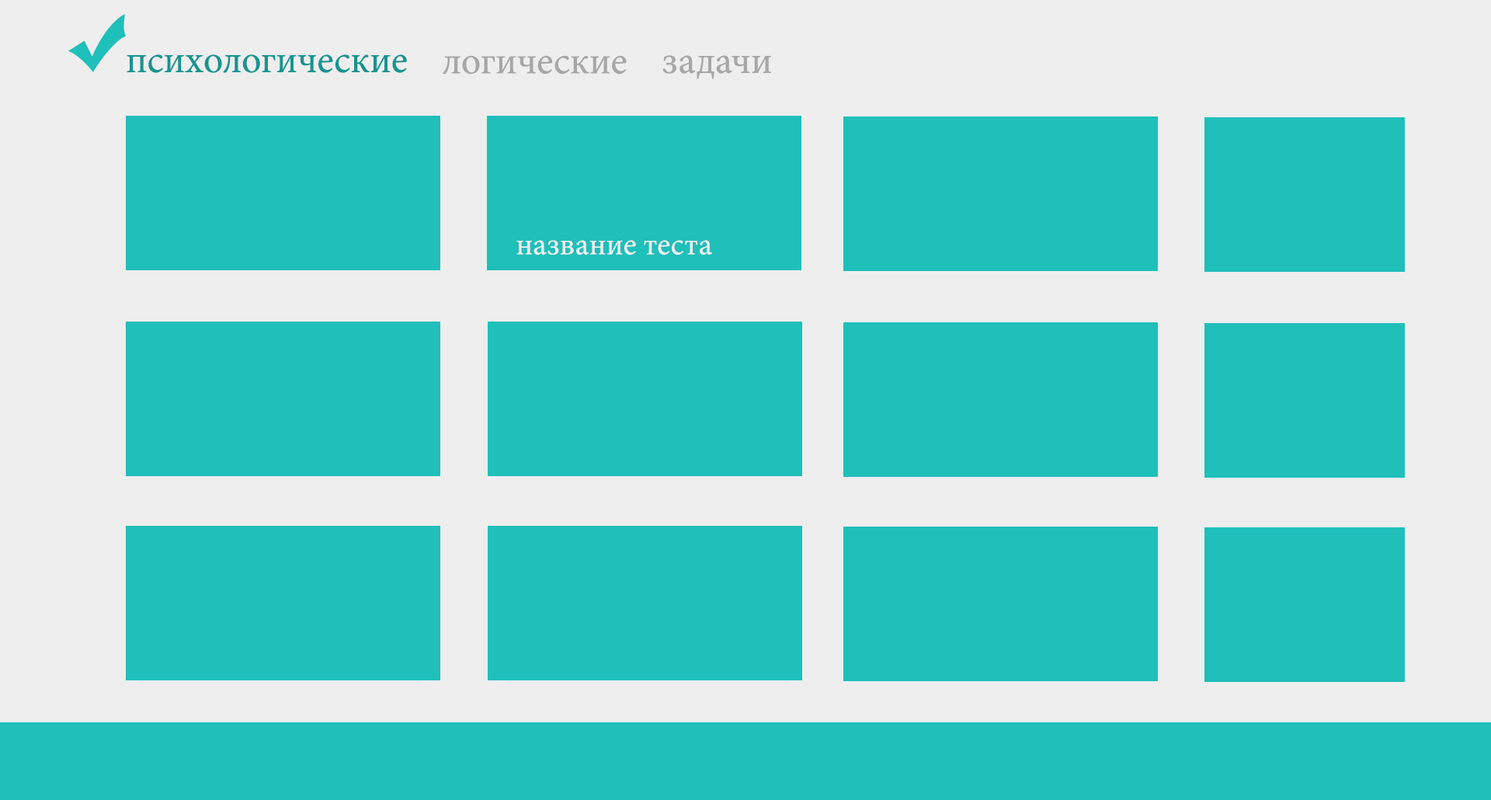
<style>
.page{position:relative;width:1491px;height:800px;background:#1fbfba}
.page>*{position:absolute;margin:0}
.t1{font:38.8px "MinionPro-Regular";color:#189490}
.t2{font:38.8px "MinionPro-Regular";color:#a7a7a7}
.t3{font:31.1px "MinionPro-Regular";color:#eeeeee}
</style>
<div class="page">
<p class="t1" style="left:127px;top:54px;width:280px;height:19px">психологические</p>
<p class="t2" style="left:443px;top:55px;width:184px;height:20px">логические</p>
<p class="t2" style="left:662px;top:55px;width:109px;height:24px">задачи</p>
<p class="t3" style="left:516px;top:240px;width:196px;height:15px">название теста</p>
</div>
